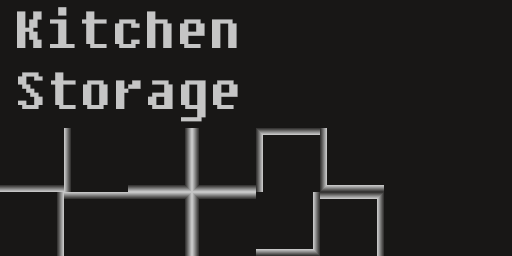
<style>
.page{position:relative;width:512px;height:256px;background:#181716}
.page>*{position:absolute;margin:0}
.t1{font:52px "Fixedsys";color:#c5c5c5}
</style>
<div class="page">
<p class="t1" style="left:17px;top:7px;width:220px;height:41px">Kitchen</p>
<p class="t1" style="left:18px;top:72px;width:220px;height:50px">Storage</p>
</div>
